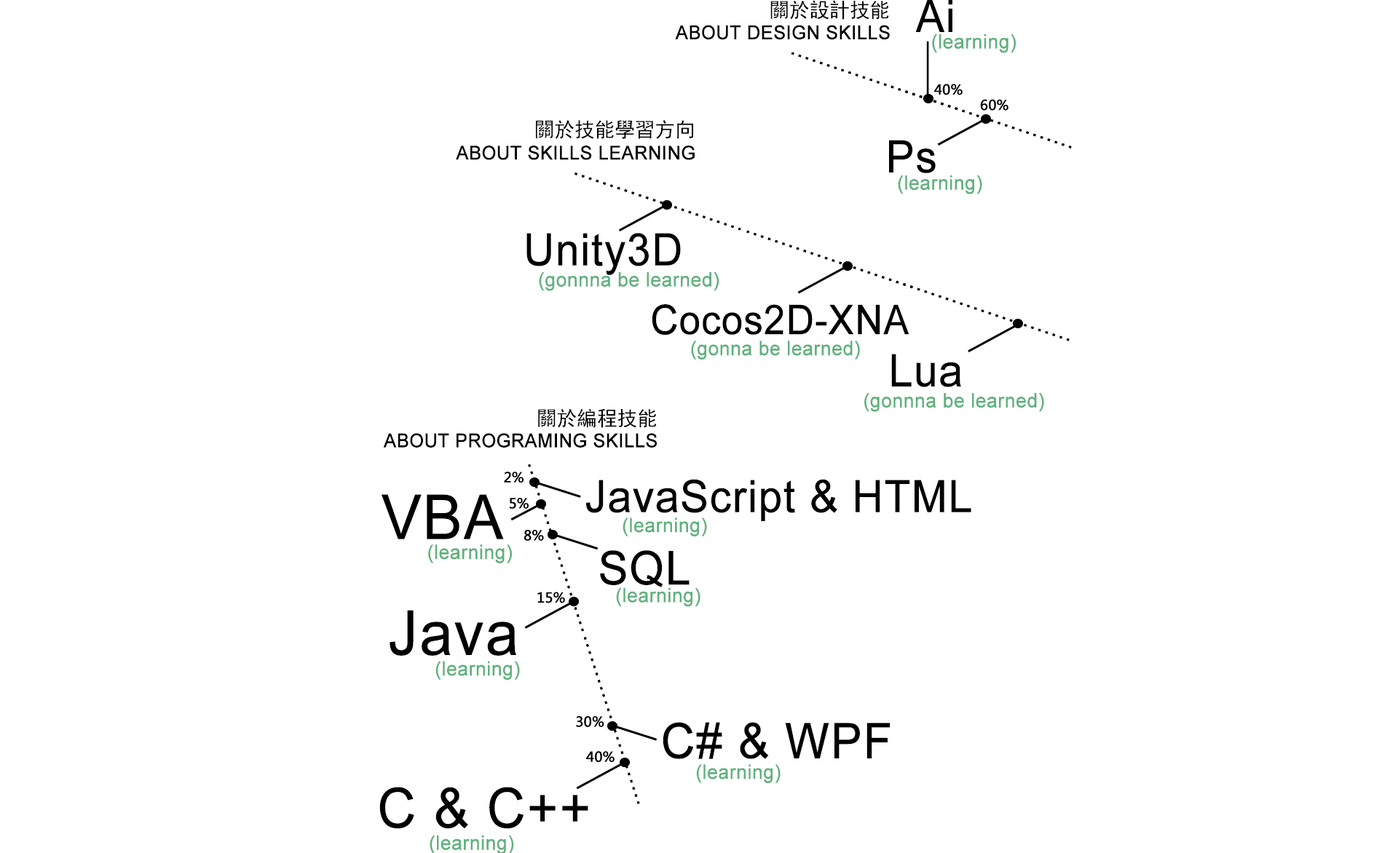
<style>
.page{position:relative;width:1398px;height:853px;background:#ffffff}
.page>*{position:absolute;margin:0}
.t1{font:20.1px "SimHei";color:#000000}
.t2{font:44.6px "ArialMT";color:#000000;font-weight:bold;scale:0.96 1}
.t3{font:19.1px "ArialMT";color:#000000;font-weight:bold;scale:0.96 1}
.t4{font:19.8px "ArialMT";color:#60b17c;font-weight:bold;scale:0.97 1}
.t5{font:13.5px "MicrosoftYaHei";color:#000000;font-weight:bold}
.t6{font:40.9px "ArialMT";color:#000000;font-weight:bold;scale:0.93 1}
.t7{font:61.8px "ArialMT";color:#000000;font-weight:bold;scale:0.96 1}
.t8{font:46.6px "ArialMT";color:#000000;font-weight:bold;scale:0.96 1}
.t9{font:48.9px "ArialMT";color:#000000;font-weight:bold;scale:0.96 1}
.t10{font:55.6px "ArialMT";color:#000000;font-weight:bold;scale:0.96 1}
</style>
<div class="page">
<p class="t1" style="left:770px;top:0px;width:119px;height:20px">關於設計技能</p>
<p class="t2" style="left:915px;top:0px;width:37px;height:32px">Ai</p>
<p class="t3" style="left:675px;top:25px;width:215px;height:15px">ABOUT DESIGN SKILLS</p>
<p class="t4" style="left:932px;top:34px;width:83px;height:19px">(learning)</p>
<p class="t5" style="left:934px;top:84px;width:28px;height:11px">40%</p>
<p class="t5" style="left:980px;top:99px;width:28px;height:12px">60%</p>
<p class="t1" style="left:536px;top:120px;width:158px;height:19px">關於技能學習方向</p>
<p class="t3" style="left:456px;top:146px;width:238px;height:14px">ABOUT SKILLS LEARNING</p>
<p class="t2" style="left:889px;top:140px;width:46px;height:33px">Ps</p>
<p class="t4" style="left:898px;top:175px;width:84px;height:19px">(learning)</p>
<p class="t2" style="left:526px;top:233px;width:155px;height:42px">Unity3D</p>
<p class="t4" style="left:539px;top:272px;width:180px;height:19px">(gonnna be learned)</p>
<p class="t6" style="left:652px;top:304px;width:257px;height:31px">Cocos2D-XNA</p>
<p class="t4" style="left:691px;top:341px;width:169px;height:19px">(gonna be learned)</p>
<p class="t2" style="left:891px;top:354px;width:70px;height:33px">Lua</p>
<p class="t4" style="left:864px;top:393px;width:180px;height:19px">(gonnna be learned)</p>
<p class="t1" style="left:538px;top:408px;width:119px;height:20px">關於編程技能</p>
<p class="t3" style="left:383px;top:433px;width:274px;height:15px">ABOUT PROGRAMING SKILLS</p>
<p class="t5" style="left:504px;top:472px;width:19px;height:11px">2%</p>
<p class="t2" style="left:586px;top:479px;width:385px;height:42px">JavaScript &amp; HTML</p>
<p class="t7" style="left:381px;top:494px;width:123px;height:45px">VBA</p>
<p class="t5" style="left:510px;top:498px;width:18px;height:11px">5%</p>
<p class="t4" style="left:622px;top:518px;width:85px;height:19px">(learning)</p>
<p class="t5" style="left:524px;top:530px;width:20px;height:11px">8%</p>
<p class="t4" style="left:428px;top:545px;width:84px;height:18px">(learning)</p>
<p class="t8" style="left:600px;top:550px;width:89px;height:37px">SQL</p>
<p class="t5" style="left:537px;top:592px;width:28px;height:11px">15%</p>
<p class="t4" style="left:616px;top:587px;width:84px;height:20px">(learning)</p>
<p class="t7" style="left:389px;top:610px;width:127px;height:46px">Java</p>
<p class="t4" style="left:435px;top:661px;width:85px;height:19px">(learning)</p>
<p class="t5" style="left:576px;top:716px;width:28px;height:11px">30%</p>
<p class="t9" style="left:662px;top:722px;width:228px;height:37px">C# &amp; WPF</p>
<p class="t5" style="left:586px;top:751px;width:28px;height:11px">40%</p>
<p class="t4" style="left:696px;top:764px;width:84px;height:19px">(learning)</p>
<p class="t10" style="left:379px;top:787px;width:209px;height:42px">C &amp; C++</p>
<p class="t4" style="left:429px;top:835px;width:85px;height:20px">(learning)</p>
</div>
